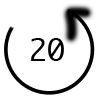
<style>
.page{position:relative;width:100px;height:100px;background:#ffffff}
.page>*{position:absolute;margin:0}
.t1{font:30px "Monaco";color:#000000}
</style>
<div class="page">
<p class="t1" style="left:31px;top:38px;width:33px;height:23px">20</p>
</div>
